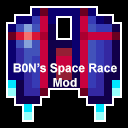
<style>
.page{position:relative;width:128px;height:128px;background:#000000}
.page>*{position:absolute;margin:0}
.t1{font:12px "Arial-BoldMT";color:#ffffff}
</style>
<div class="page">
<p class="t1" style="left:13px;top:63px;width:104px;height:24px;text-align:center">B0N’s Space Race<br>Mod</p>
</div>
